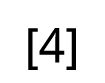
<style>
.page{position:relative;width:105px;height:83px;background:#ffffff}
.page>*{position:absolute;margin:0}
.t1{font:47.9px "DroidSans";color:#000000}
</style>
<div class="page">
<p class="t1" style="left:28px;top:28px;width:48px;height:42px">[4]</p>
</div>
